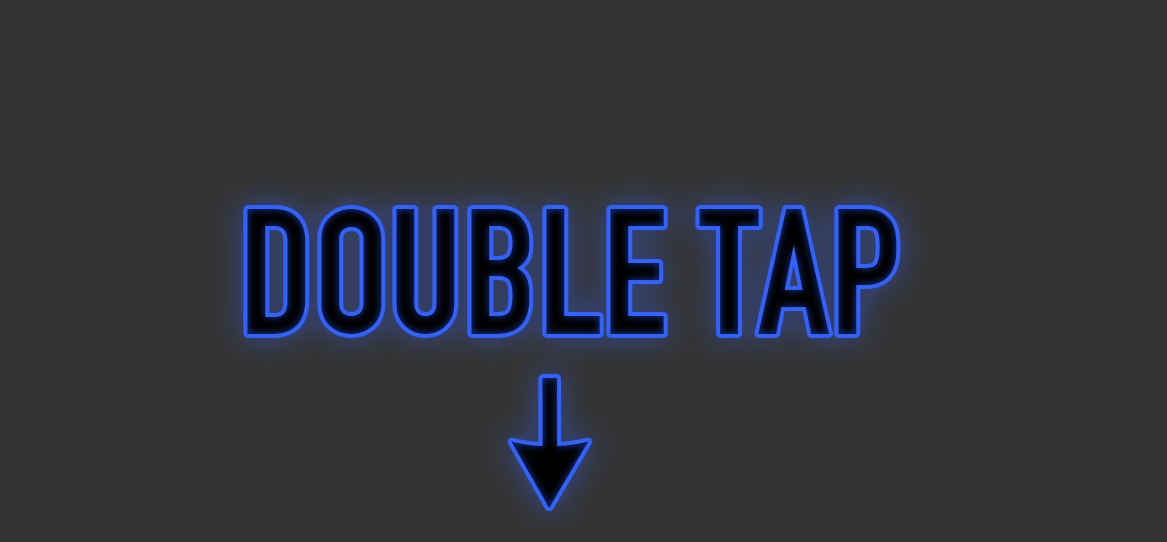
<style>
.page{position:relative;width:1167px;height:542px;background:#333333}
.page>*{position:absolute;margin:0}
.t1{font:175.4px "DINEngschrift";color:#040815}
</style>
<div class="page">
<p class="t1" style="left:247px;top:209px;width:650px;height:125px">DOUBLE TAP</p>
</div>
